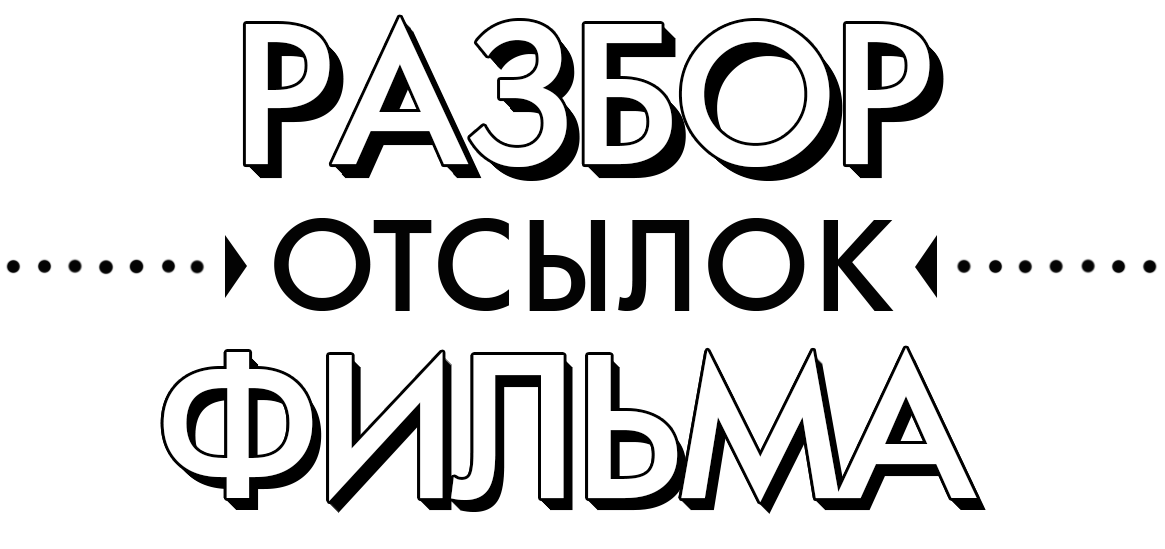
<style>
.page{position:relative;width:1165px;height:549px;background:#ffffff}
.page>*{position:absolute;margin:0}
.t1{font:185.1px "AFuturicaMedium";color:#ffffff;text-transform:uppercase}
.t2{font:185.1px "AFuturicaMedium";text-transform:uppercase}
.t3{font:120px "AFuturicaMedium";letter-spacing:0.065em;color:#030303;text-transform:uppercase}
.t4{font:190px "AFuturicaMedium";color:#ffffff;text-transform:uppercase}
.t5{font:190px "AFuturicaMedium";text-transform:uppercase}
</style>
<div class="page">
<p class="t1" style="left:245px;top:17px;width:685px;height:150px">разбор</p>
<p class="t1" style="left:245px;top:17px;width:685px;height:150px">разбор</p>
<p class="t1" style="left:246px;top:18px;width:685px;height:150px">разбор</p>
<p class="t2" style="left:256px;top:28px;width:685px;height:150px">разбор</p>
<p class="t2" style="left:257px;top:29px;width:685px;height:150px">разбор</p>
<p class="t2" style="left:258px;top:30px;width:685px;height:150px">разбор</p>
<p class="t2" style="left:259px;top:31px;width:685px;height:150px">разбор</p>
<p class="t3" style="left:274px;top:218px;width:620px;height:93px">ОТСЫЛОК</p>
<p class="t4" style="left:163px;top:348px;width:814px;height:154px">ФИЛЬМА</p>
<p class="t5" style="left:172px;top:360px;width:814px;height:154px">ФИЛЬМА</p>
</div>
